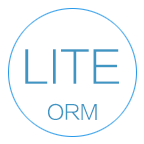
<style>
.page{position:relative;width:144px;height:144px;background:#ffffff}
.page>*{position:absolute;margin:0}
.t1{font:44px "FZLTXHK--GBK1-0";color:#3f96c3}
.t2{font:20px "FZLTXHK--GBK1-0";color:#3f96c3}
</style>
<div class="page">
<p class="t1" style="left:25px;top:49px;width:94px;height:35px">LITE</p>
<p class="t2" style="left:48px;top:103px;width:49px;height:17px">ORM</p>
</div>
